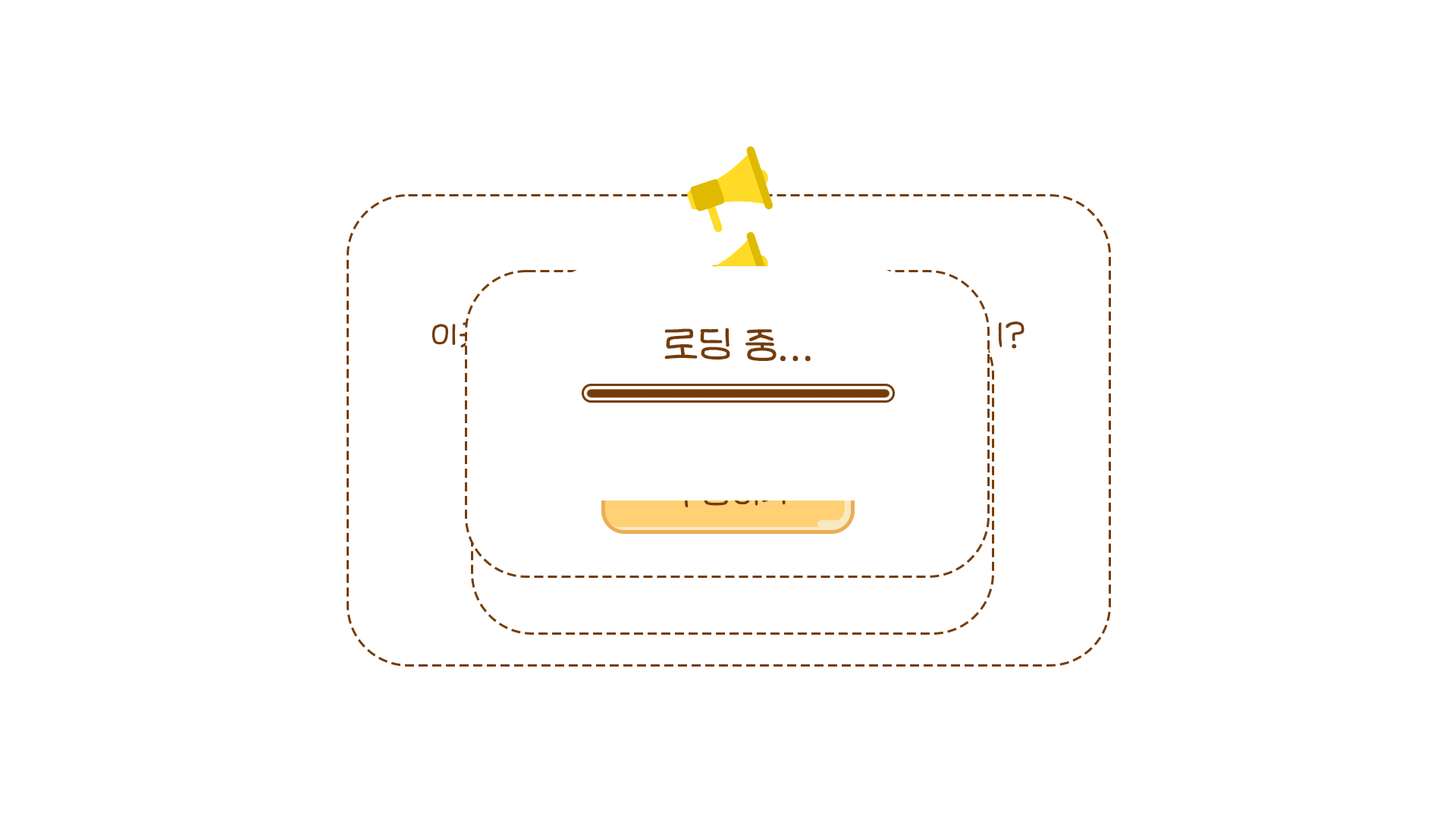
<style>
.page{position:relative;width:1456px;height:819px;background:#ffffff}
.page>*{position:absolute;margin:0}
.t1{font:45.5px "LeeSeoyun";color:#753c08}
.t2{font:36.4px "LeeSeoyun";color:#ffffff}
</style>
<div class="page">
<p class="t1" style="left:664px;top:328px;width:147px;height:34px">로딩 중...</p>
<p class="t2" style="left:673px;top:480px;width:113px;height:27px">구경하기</p>
</div>
